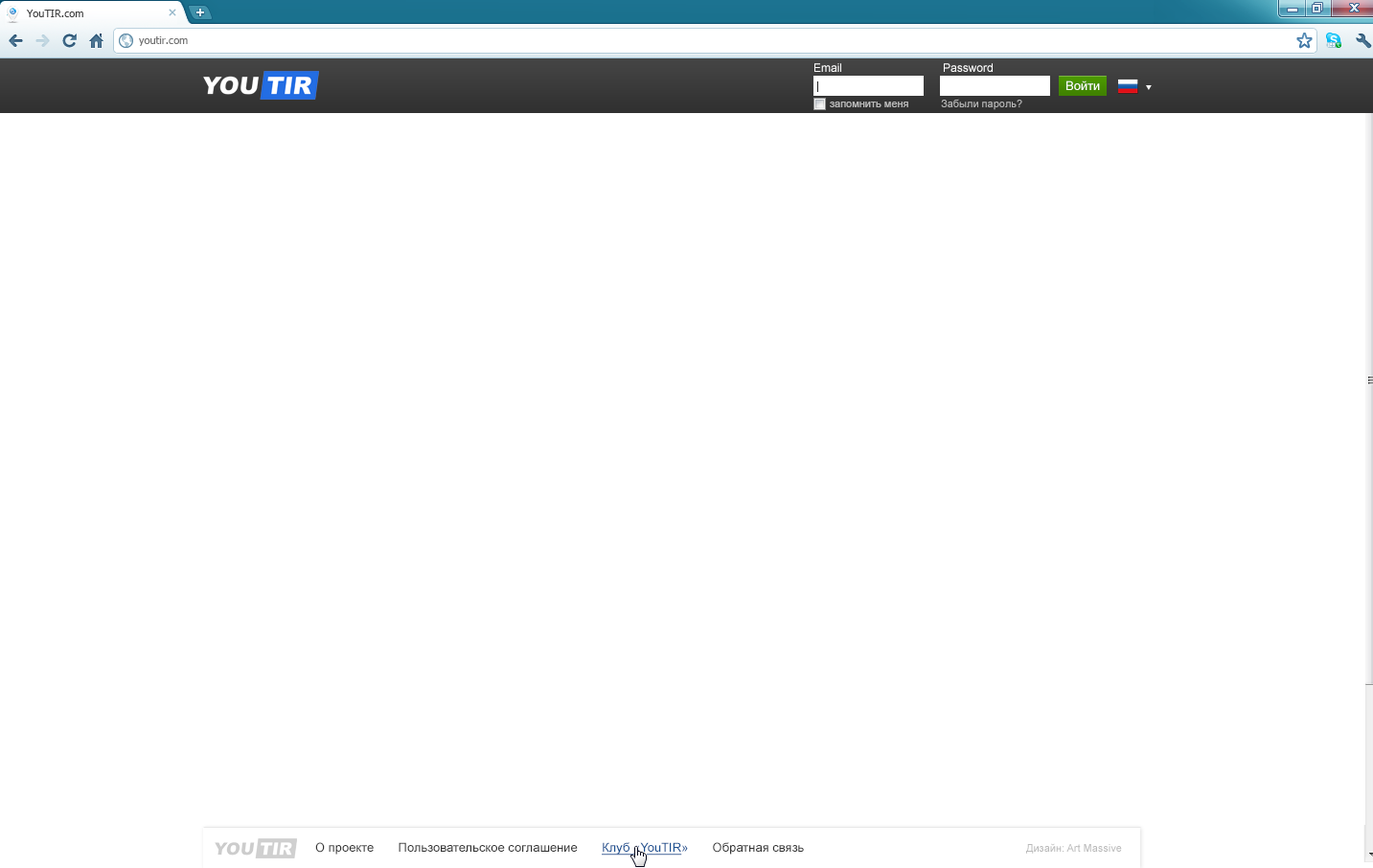
<style>
.page{position:relative;width:1373px;height:868px;background:#ffffff}
.page>*{position:absolute;margin:0}
.t1{font:10.5px "Tahoma";color:#3e3e3e}
.t2{font:10.5px "Tahoma";color:#717171}
.t3{font:11.5px "ArialMT";color:#ffffff}
.t4{font:12.5px "ArialMT";color:#ffffff}
.t5{font:10.5px "ArialMT";color:#bababa}
.t6{font:12.5px "ArialMT";color:#333333}
.t7{font:12.5px "ArialMT";color:#1c5192;text-decoration:underline}
.t8{font:12.5px "ArialMT";color:#1c5192}
</style>
<div class="page">
<p class="t1" style="left:26px;top:10px;width:57px;height:7px">YouTIR.com</p>
<p class="t2" style="left:139px;top:36px;width:49px;height:10px">youtir.com</p>
<p class="t3" style="left:815px;top:63px;width:26px;height:9px">Email</p>
<p class="t3" style="left:944px;top:63px;width:49px;height:9px">Password</p>
<p class="t4" style="left:1067px;top:81px;width:33px;height:9px">Войти</p>
<p class="t5" style="left:830px;top:102px;width:79px;height:5px">запомнить меня</p>
<p class="t5" style="left:941px;top:99px;width:82px;height:11px">Забыли пароль?</p>
<p class="t6" style="left:315px;top:842px;width:489px;height:14px">О проекте       Пользовательское соглашение       <span class="t7">Клуб «YouTIR</span><span class="t8">»       </span>Обратная связь</p>
<p class="t5" style="left:1026px;top:843px;width:96px;height:11px">Дизайн: Art Massive</p>
</div>
